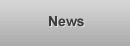
<style>
.page{position:relative;width:130px;height:46px}
.page>*{position:absolute;margin:0}
.t1{font:14px "Arial-BoldMT";color:#403f3f}
</style>
<div class="page">
<p class="t1" style="left:49px;top:16px;width:35px;height:11px">News</p>
</div>
